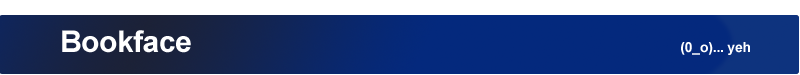
<style>
.page{position:relative;width:800px;height:75px;background:#04297d}
.page>*{position:absolute;margin:0}
.t1{font:14px "Arial-BoldMT";letter-spacing:-0.015em;color:#ffffff}
.t2{font:30px "Arial-BoldMT";letter-spacing:-0.015em;color:#ffffff}
</style>
<div class="page">
<p class="t1" style="left:62px;top:30px;width:688px;height:25px"><span class="t2">Bookface                                                              </span>(0_o)... yeh</p>
</div>
